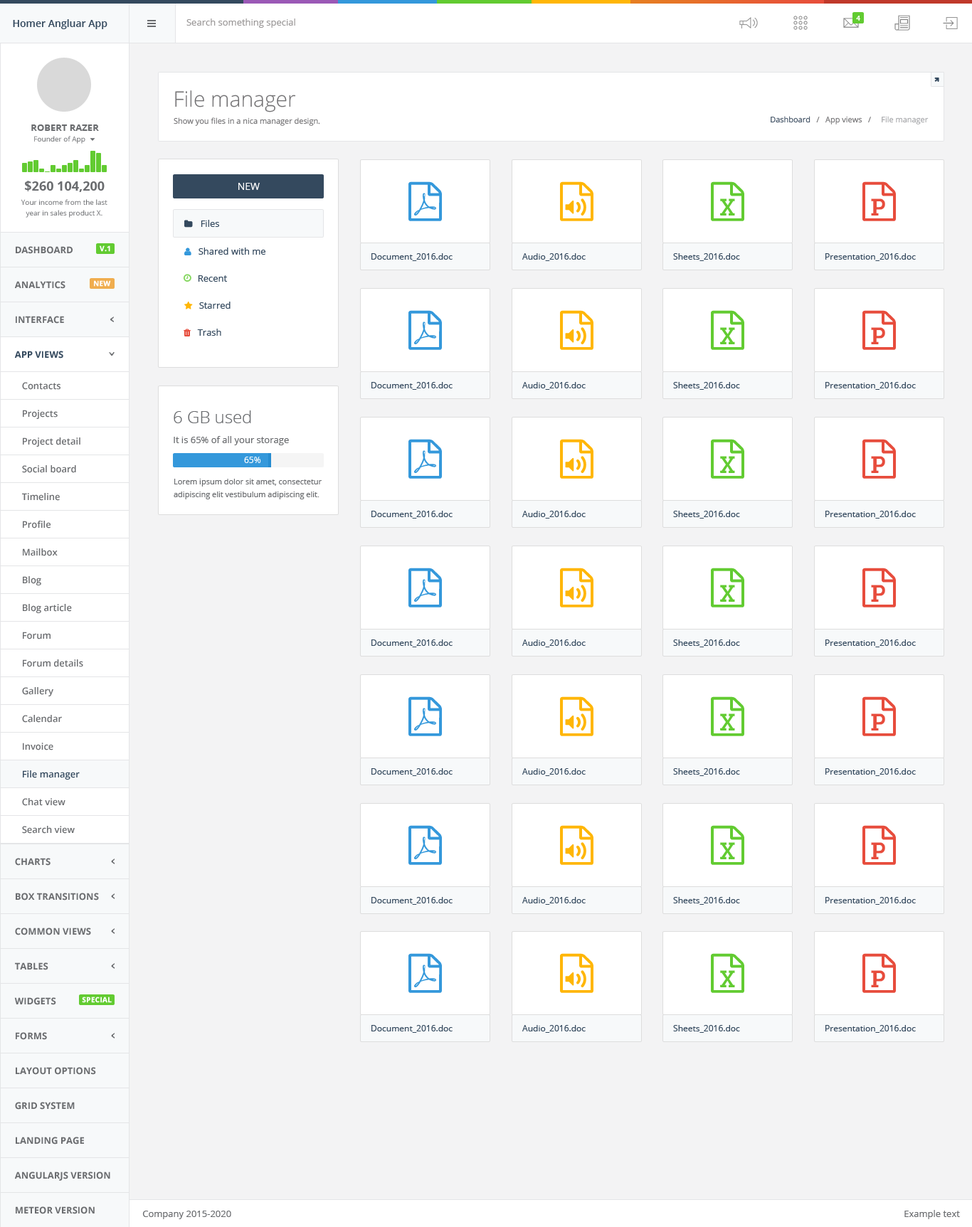
<style>
.page{position:relative;width:972px;height:1227px;background:#ffffff}
.page>*{position:absolute;margin:0}
.t1{font:7.1px "OpenSans-Bold";color:#ffffff}
.t2{font:10px "OpenSans-Semibold";color:#34495e}
.t3{font:9.2px "OpenSans";color:#9c9999}
.t4{font:21.3px "OpenSans-Light";color:#727173}
.t5{font:9.2px "OpenSans-Bold";color:#6a6c6f}
.t6{font:7.8px "OpenSans";color:#727173}
.t7{font:7.8px "OpenSans";color:#3c4d60}
.t8{font:7.8px "OpenSans";color:#a5a6a9}
.t9{font:7.1px "OpenSans";color:#6a6c6f}
.t10{font:12.8px "OpenSans-Bold";color:#6a6c6f}
.t11{font:10px "OpenSans";color:#ffffff}
.t12{font:7.1px/10.7px "OpenSans";color:#6a6c6f}
.t13{font:9.2px "OpenSans";color:#34495e}
.t14{font:7.1px "OpenSans-Bold";color:#ffffff;font-weight:bold}
.t15{font:8.5px "OpenSans";color:#34495e}
.t16{font:9.2px "OpenSans-Bold";color:#34495e}
.t17{font:9.2px "OpenSans-Semibold";color:#6a6c6f}
.t18{font:17.1px "OpenSans-Light";color:#6a6c6f}
.t19{font:9.2px "OpenSans";color:#6a6c6f}
.t20{font:8.5px "OpenSans";color:#ffffff}
.t21{font:7.8px/12.8px "OpenSans";color:#6a6c6f}
.t22{font:9.2px "OpenSans-Semibold";color:#34495e}
</style>
<div class="page">
<p class="t1" style="left:856px;top:16px;width:4px;height:5px">4</p>
<p class="t2" style="left:13px;top:19px;width:94px;height:10px">Homer Angluar App</p>
<p class="t3" style="left:186px;top:18px;width:109px;height:10px">Search something special</p>
<p class="t4" style="left:175px;top:90px;width:121px;height:22px">File manager</p>
<p class="t5" style="left:31px;top:124px;width:68px;height:7px">ROBERT RAZER</p>
<p class="t6" style="left:174px;top:117px;width:146px;height:9px">Show you files in a nica manager design.</p>
<p class="t6" style="left:770px;top:116px;width:158px;height:8px"><span class="t7">Dashboard</span>   /   App views   /    <span class="t8"> File manager</span></p>
<p class="t9" style="left:34px;top:136px;width:51px;height:8px">Founder of App</p>
<p class="t10" style="left:25px;top:181px;width:80px;height:11px">$260 104,200</p>
<p class="t11" style="left:238px;top:183px;width:22px;height:7px">NEW</p>
<p class="t12" style="left:21px;top:199px;width:86px;height:19px;text-align:center">Your income from the last<br>year in sales product X.</p>
<p class="t13" style="left:201px;top:220px;width:18px;height:7px">Files</p>
<p class="t14" style="left:100px;top:245px;width:10px;height:7px">V.1</p>
<p class="t5" style="left:16px;top:246px;width:57px;height:8px">DASHBOARD</p>
<p class="t13" style="left:198px;top:248px;width:67px;height:7px">Shared with me</p>
<p class="t15" style="left:371px;top:253px;width:81px;height:8px">Document_2016.doc</p>
<p class="t15" style="left:522px;top:253px;width:63px;height:8px">Audio_2016.doc</p>
<p class="t15" style="left:673px;top:253px;width:67px;height:8px">Sheets_2016.doc</p>
<p class="t15" style="left:825px;top:253px;width:91px;height:8px">Presentation_2016.doc</p>
<p class="t5" style="left:14px;top:281px;width:51px;height:8px">ANALYTICS</p>
<p class="t14" style="left:94px;top:280px;width:17px;height:7px">NEW</p>
<p class="t13" style="left:198px;top:275px;width:29px;height:7px">Recent</p>
<p class="t13" style="left:199px;top:302px;width:31px;height:7px">Starred</p>
<p class="t5" style="left:16px;top:316px;width:48px;height:8px">INTERFACE</p>
<p class="t13" style="left:197px;top:329px;width:24px;height:7px">Trash</p>
<p class="t16" style="left:14px;top:351px;width:49px;height:8px">APP VIEWS</p>
<p class="t17" style="left:22px;top:382px;width:38px;height:8px">Contacts</p>
<p class="t15" style="left:371px;top:382px;width:81px;height:8px">Document_2016.doc</p>
<p class="t15" style="left:522px;top:382px;width:63px;height:8px">Audio_2016.doc</p>
<p class="t15" style="left:673px;top:382px;width:67px;height:8px">Sheets_2016.doc</p>
<p class="t15" style="left:825px;top:382px;width:91px;height:8px">Presentation_2016.doc</p>
<p class="t17" style="left:23px;top:410px;width:35px;height:9px">Projects</p>
<p class="t18" style="left:174px;top:410px;width:77px;height:13px">6 GB used</p>
<p class="t17" style="left:23px;top:437px;width:57px;height:10px">Project detail</p>
<p class="t19" style="left:174px;top:436px;width:115px;height:9px">It is 65% of all your storage</p>
<p class="t20" style="left:244px;top:457px;width:17px;height:6px">65%</p>
<p class="t17" style="left:22px;top:465px;width:54px;height:8px">Social board</p>
<p class="t21" style="left:174px;top:479px;width:148px;height:20px">Lorem ipsum dolor sit amet, consectetur adipiscing elit vestibulum adipiscing elit.</p>
<p class="t17" style="left:22px;top:493px;width:38px;height:8px">Timeline</p>
<p class="t17" style="left:23px;top:521px;width:28px;height:8px">Profile</p>
<p class="t15" style="left:371px;top:511px;width:81px;height:8px">Document_2016.doc</p>
<p class="t15" style="left:522px;top:511px;width:63px;height:8px">Audio_2016.doc</p>
<p class="t15" style="left:673px;top:511px;width:67px;height:8px">Sheets_2016.doc</p>
<p class="t15" style="left:825px;top:511px;width:91px;height:8px">Presentation_2016.doc</p>
<p class="t17" style="left:23px;top:548px;width:35px;height:8px">Mailbox</p>
<p class="t17" style="left:23px;top:576px;width:18px;height:9px">Blog</p>
<p class="t17" style="left:23px;top:604px;width:49px;height:9px">Blog article</p>
<p class="t17" style="left:23px;top:632px;width:28px;height:8px">Forum</p>
<p class="t15" style="left:371px;top:640px;width:81px;height:7px">Document_2016.doc</p>
<p class="t15" style="left:522px;top:640px;width:63px;height:7px">Audio_2016.doc</p>
<p class="t15" style="left:673px;top:640px;width:67px;height:7px">Sheets_2016.doc</p>
<p class="t15" style="left:825px;top:640px;width:91px;height:7px">Presentation_2016.doc</p>
<p class="t17" style="left:23px;top:659px;width:60px;height:8px">Forum details</p>
<p class="t17" style="left:22px;top:687px;width:31px;height:9px">Gallery</p>
<p class="t17" style="left:22px;top:715px;width:40px;height:8px">Calendar</p>
<p class="t17" style="left:23px;top:743px;width:30px;height:7px">Invoice</p>
<p class="t22" style="left:23px;top:770px;width:57px;height:10px">File manager</p>
<p class="t15" style="left:371px;top:768px;width:81px;height:8px">Document_2016.doc</p>
<p class="t15" style="left:522px;top:768px;width:63px;height:8px">Audio_2016.doc</p>
<p class="t15" style="left:673px;top:768px;width:67px;height:8px">Sheets_2016.doc</p>
<p class="t15" style="left:825px;top:768px;width:91px;height:8px">Presentation_2016.doc</p>
<p class="t17" style="left:22px;top:798px;width:43px;height:8px">Chat view</p>
<p class="t17" style="left:22px;top:826px;width:53px;height:8px">Search view</p>
<p class="t5" style="left:15px;top:858px;width:36px;height:8px">CHARTS</p>
<p class="t5" style="left:16px;top:893px;width:83px;height:8px">BOX TRANSITIONS</p>
<p class="t15" style="left:371px;top:897px;width:81px;height:8px">Document_2016.doc</p>
<p class="t15" style="left:522px;top:897px;width:63px;height:8px">Audio_2016.doc</p>
<p class="t15" style="left:673px;top:897px;width:67px;height:8px">Sheets_2016.doc</p>
<p class="t15" style="left:825px;top:897px;width:91px;height:8px">Presentation_2016.doc</p>
<p class="t5" style="left:15px;top:928px;width:76px;height:7px">COMMON VIEWS</p>
<p class="t5" style="left:15px;top:962px;width:33px;height:8px">TABLES</p>
<p class="t5" style="left:14px;top:997px;width:42px;height:8px">WIDGETS</p>
<p class="t14" style="left:82px;top:997px;width:30px;height:6px">SPECIAL</p>
<p class="t15" style="left:371px;top:1025px;width:81px;height:8px">Document_2016.doc</p>
<p class="t15" style="left:522px;top:1025px;width:63px;height:8px">Audio_2016.doc</p>
<p class="t15" style="left:673px;top:1025px;width:67px;height:8px">Sheets_2016.doc</p>
<p class="t15" style="left:825px;top:1025px;width:91px;height:8px">Presentation_2016.doc</p>
<p class="t5" style="left:16px;top:1032px;width:31px;height:8px">FORMS</p>
<p class="t5" style="left:16px;top:1067px;width:80px;height:8px">LAYOUT OPTIONS</p>
<p class="t5" style="left:15px;top:1102px;width:60px;height:8px">GRID SYSTEM</p>
<p class="t5" style="left:16px;top:1137px;width:68px;height:8px">LANDING PAGE</p>
<p class="t5" style="left:14px;top:1172px;width:96px;height:9px">ANGULARJS VERSION</p>
<p class="t5" style="left:16px;top:1206px;width:79px;height:8px">METEOR VERSION</p>
<p class="t19" style="left:142px;top:1211px;width:89px;height:8px">Company 2015-2020</p>
<p class="t19" style="left:904px;top:1210px;width:56px;height:9px">Example text</p>
</div>
